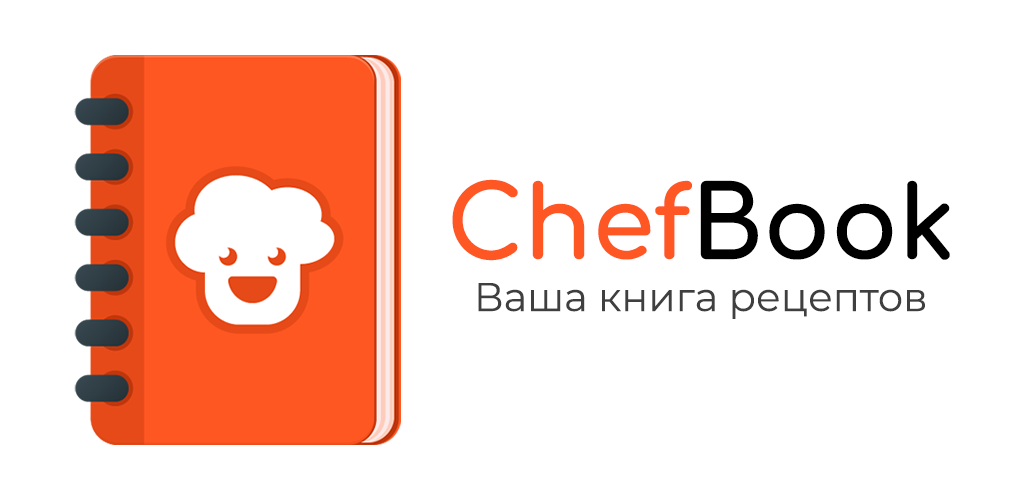
<style>
.page{position:relative;width:1024px;height:500px;background:#ffffff}
.page>*{position:absolute;margin:0}
.t1{font:40px/52px "Montserrat-Regular";color:#3f3f3f}
.t2{font:100px "Comfortaa-Bold";color:#ff5723}
.t3{font:100px "Comfortaa-Bold";color:#000000}
</style>
<div class="page">
<p class="t1" style="left:452px;top:179px;width:498px;height:140px;text-align:center"><span class="t2">Chef</span><span class="t3">Book<br></span>Ваша книга рецептов</p>
</div>
